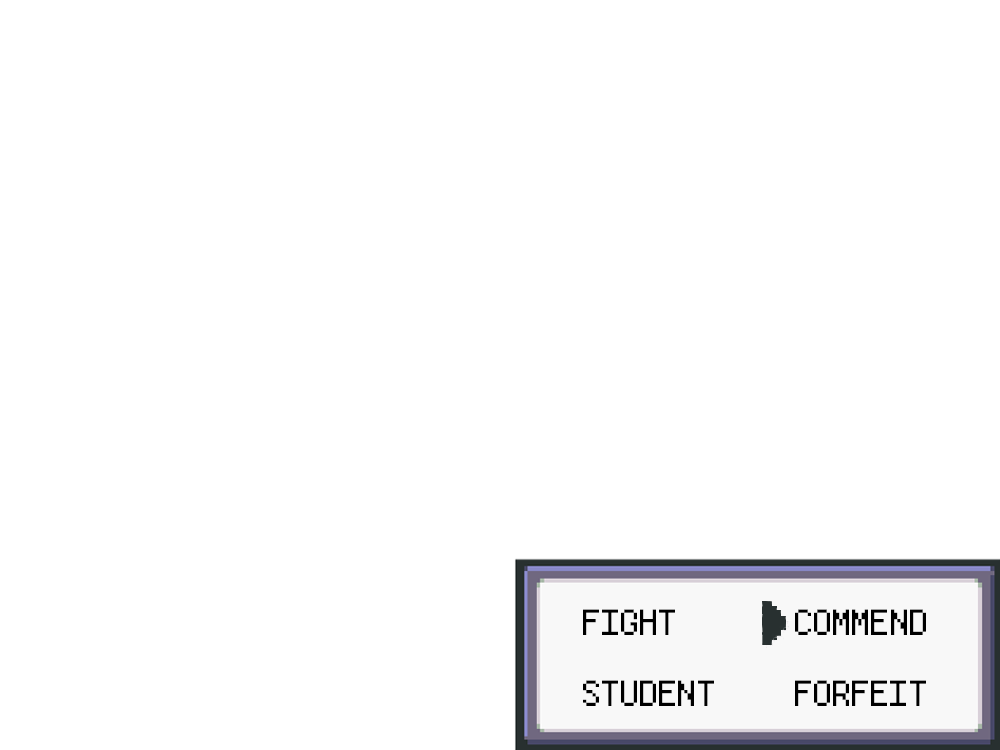
<style>
.page{position:relative;width:1000px;height:750px;background:#ffffff}
.page>*{position:absolute;margin:0}
.t1{font:50.8px "Pokemon-Fire-Red";color:#000000}
</style>
<div class="page">
<p class="t1" style="left:583px;top:609px;width:92px;height:26px">FIGHT</p>
<p class="t1" style="left:795px;top:609px;width:131px;height:26px">COMMEND</p>
<p class="t1" style="left:583px;top:680px;width:131px;height:26px">STUDENT</p>
<p class="t1" style="left:795px;top:680px;width:131px;height:26px">FORFEIT</p>
</div>
